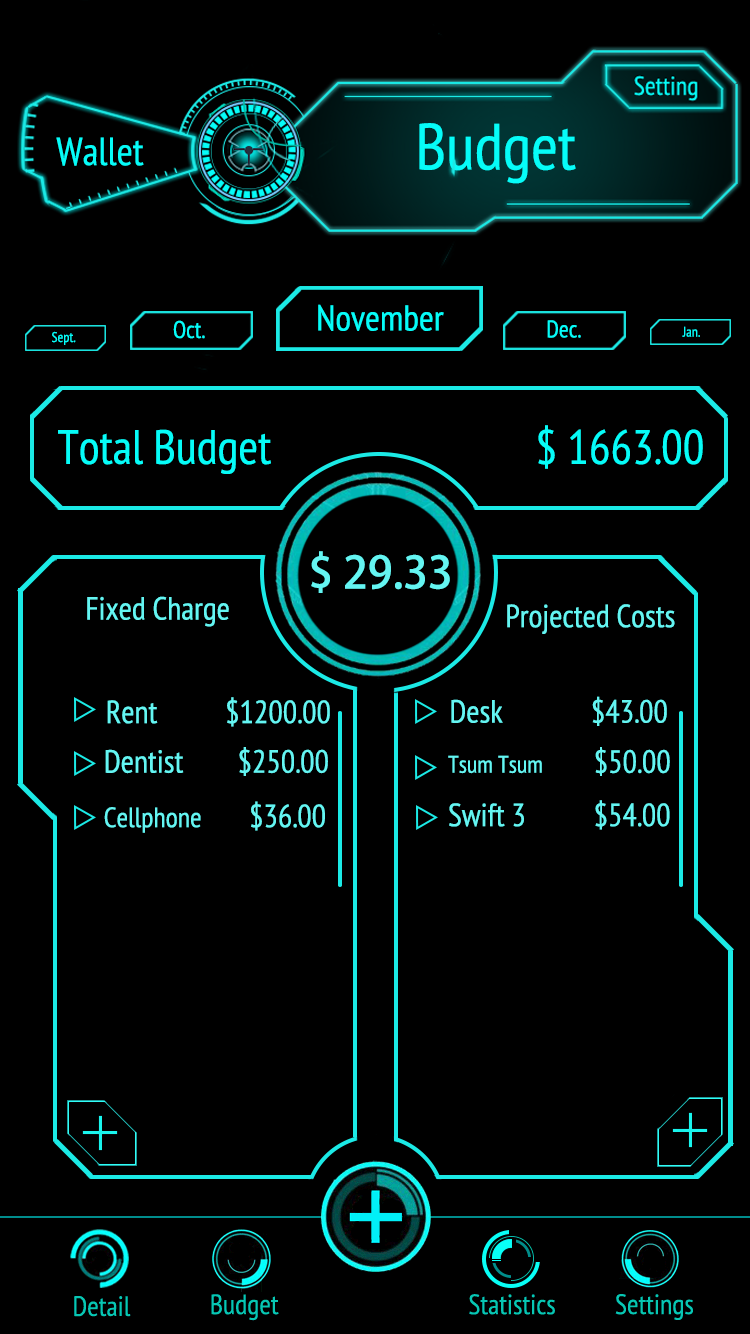
<style>
.page{position:relative;width:750px;height:1334px;background:#000000}
.page>*{position:absolute;margin:0}
.t1{font:65.2px "PTSans-Narrow";color:#06fcf8}
.t2{font:39.1px "PTSans-Narrow";color:#06fcf8}
.t3{font:36px "PTSans-Narrow";color:#06fcf8}
.t4{font:24px "PTSans-Narrow";color:#06fcf8}
.t5{font:12px "PTSans-Narrow";color:#06fcf8}
.t6{font:14px "PTSans-Narrow";color:#06fcf8}
.t7{font:48px "PTSans-Narrow";color:#06fcf8}
.t8{font:44px "AdobeHeitiStd-Regular";color:#64f5f2}
.t9{font:32px "PTSans-Narrow";color:#64f5f2}
.t10{font:24px "PTSans-Narrow";color:#64f5f2}
.t11{font:28px "PTSans-Narrow";color:#64f5f2}
</style>
<div class="page">
<p class="t1" style="left:419px;top:123px;width:157px;height:61px">Budget</p>
<p class="t2" style="left:56px;top:137px;width:88px;height:29px">Wallet</p>
<p class="t3" style="left:318px;top:304px;width:126px;height:27px">November</p>
<p class="t4" style="left:173px;top:320px;width:32px;height:19px">Oct.</p>
<p class="t5" style="left:547px;top:320px;width:34px;height:18px">Dec.</p>
<p class="t6" style="left:682px;top:326px;width:18px;height:11px">Jan.</p>
<p class="t6" style="left:52px;top:331px;width:24px;height:14px">Sept.</p>
<p class="t7" style="left:58px;top:425px;width:645px;height:49px">Total Budget         $ 1663.00</p>
<p class="t8" style="left:311px;top:551px;width:139px;height:42px">$ 29.33</p>
<p class="t9" style="left:87px;top:596px;width:142px;height:31px">Fixed Charge</p>
<p class="t9" style="left:507px;top:604px;width:168px;height:30px">Projected Costs</p>
<p class="t9" style="left:107px;top:697px;width:223px;height:30px">Rent          $1200.00</p>
<p class="t9" style="left:451px;top:696px;width:216px;height:30px">Desk             $43.00</p>
<p class="t9" style="left:105px;top:747px;width:223px;height:29px">Dentist        $250.00</p>
<p class="t10" style="left:448px;top:747px;width:222px;height:29px">Tsum Tsum          <span class="t9">$50.00</span></p>
<p class="t11" style="left:104px;top:801px;width:221px;height:32px">Cellphone<span class="t9">       $36.00</span></p>
<p class="t9" style="left:449px;top:800px;width:221px;height:30px">Swift 3          $54.00</p>
</div>
